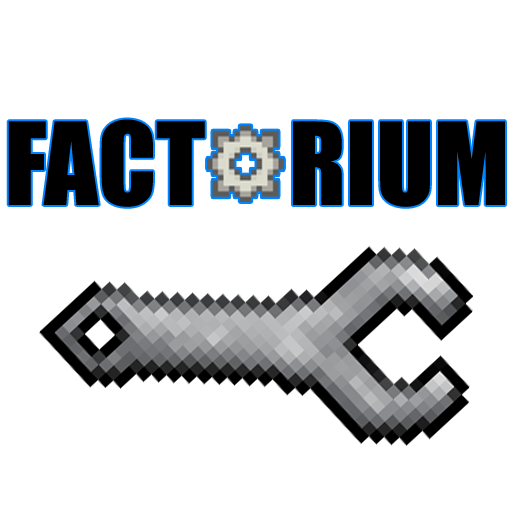
<style>
.page{position:relative;width:512px;height:512px;background:#ffffff}
.page>*{position:absolute;margin:0}
.t1{font:105.5px "Impact";color:#000000}
</style>
<div class="page">
<p class="t1" style="left:8px;top:119px;width:497px;height:88px">FACT RIUM</p>
</div>
